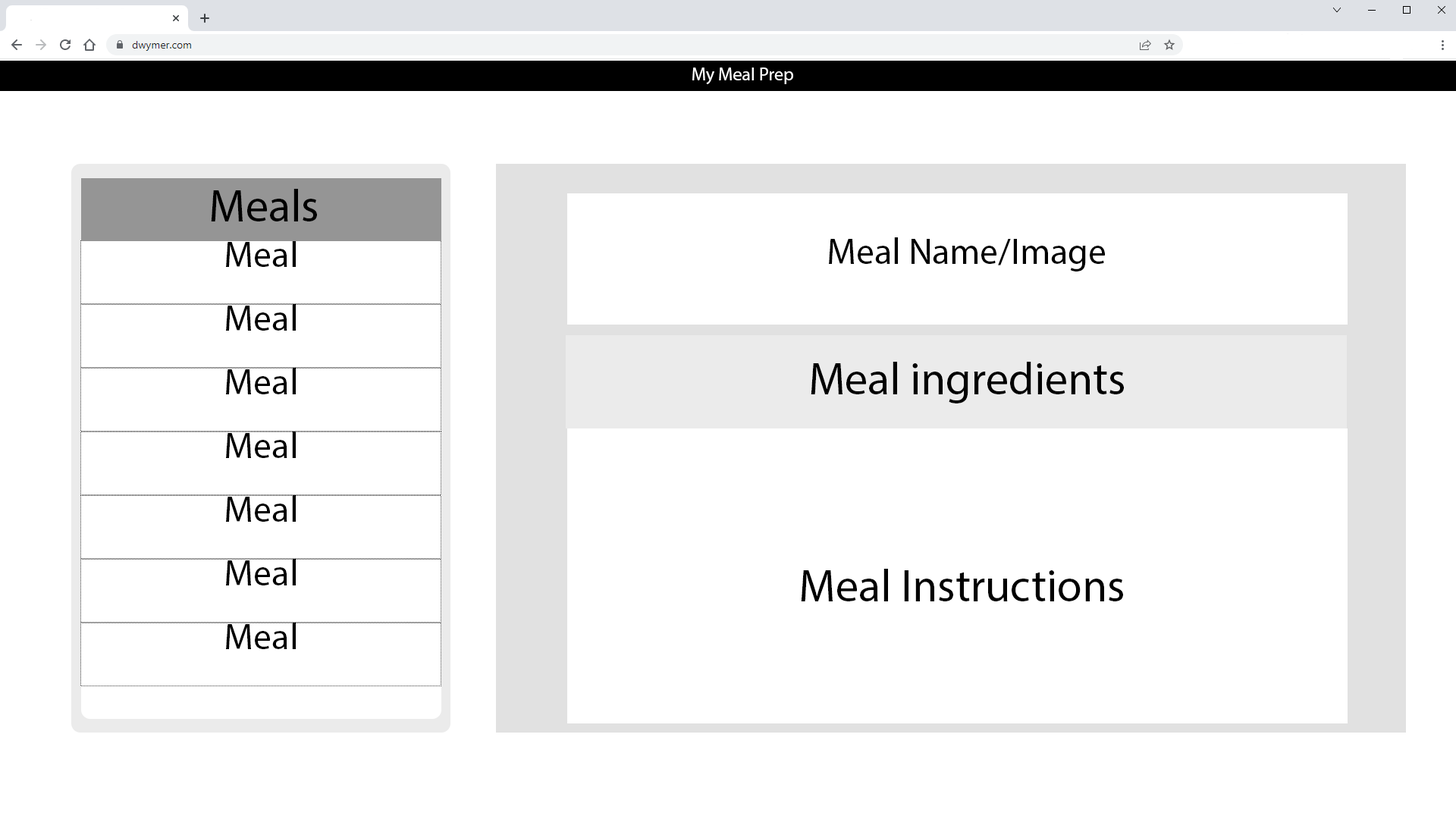
<style>
.page{position:relative;width:1456px;height:819px;background:#ffffff}
.page>*{position:absolute;margin:0}
.t1{font:18.2px "MyriadPro-Regular";color:#ffffff}
.t2{font:45.5px "MyriadPro-Regular";color:#000000}
.t3{font:36.4px "MyriadPro-Regular";color:#000000}
</style>
<div class="page">
<p class="t1" style="left:692px;top:67px;width:101px;height:17px">My Meal Prep</p>
<p class="t2" style="left:211px;top:189px;width:106px;height:32px">Meals</p>
<p class="t3" style="left:226px;top:240px;width:70px;height:27px">Meal</p>
<p class="t3" style="left:829px;top:237px;width:276px;height:34px">Meal Name/Image</p>
<p class="t3" style="left:226px;top:304px;width:70px;height:27px">Meal</p>
<p class="t2" style="left:811px;top:362px;width:313px;height:41px">Meal ingredients</p>
<p class="t3" style="left:226px;top:368px;width:70px;height:26px">Meal</p>
<p class="t3" style="left:226px;top:431px;width:70px;height:27px">Meal</p>
<p class="t3" style="left:226px;top:495px;width:70px;height:27px">Meal</p>
<p class="t3" style="left:226px;top:559px;width:70px;height:26px">Meal</p>
<p class="t2" style="left:801px;top:569px;width:322px;height:32px">Meal Instructions</p>
<p class="t3" style="left:226px;top:623px;width:70px;height:26px">Meal</p>
</div>
